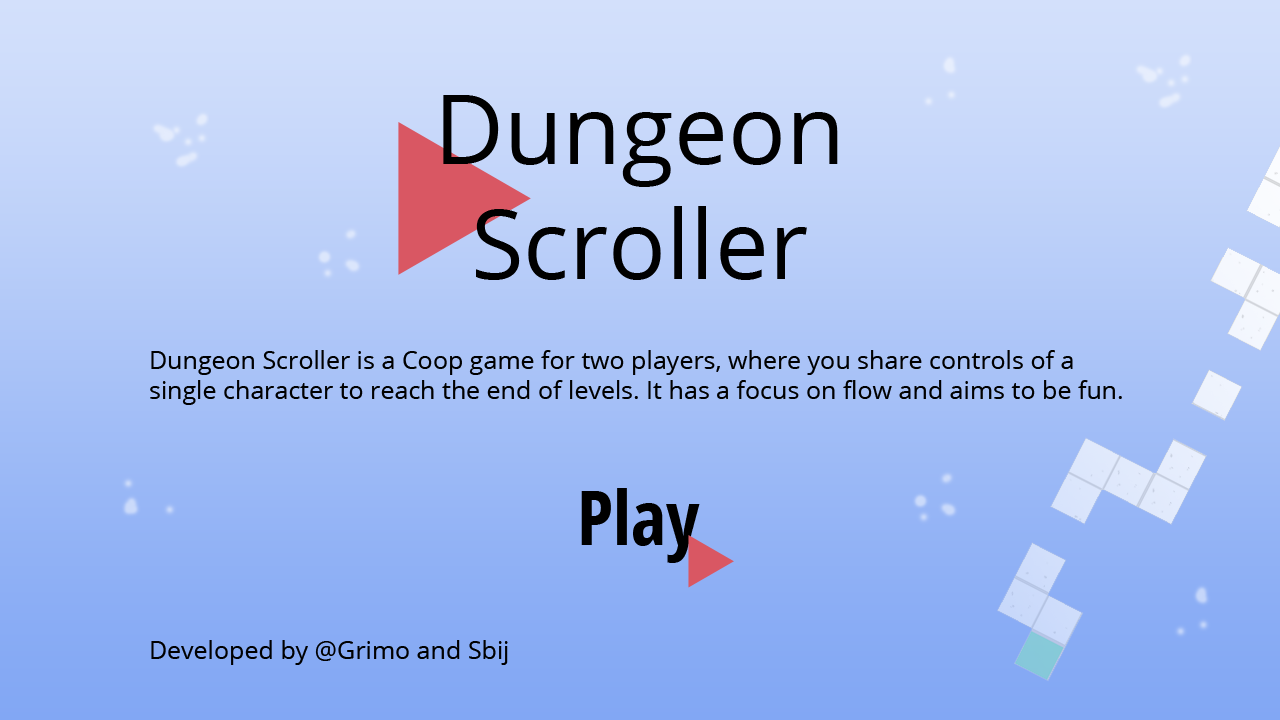
<style>
.page{position:relative;width:1280px;height:720px}
.page>*{position:absolute;margin:0}
.t1{font:96px "OpenSans";color:#000000}
.t2{font:25px "OpenSans";color:#000000}
.t3{font:75px "OpenSans-CondensedBold";color:#000000}
</style>
<div class="page">
<p class="t1" style="left:443px;top:95px;width:395px;height:185px;text-align:center">Dungeon<br>Scroller</p>
<p class="t2" style="left:150px;top:350px;width:972px;height:55px">Dungeon Scroller is a Coop game for two players, where you share controls of a single character to reach the end of levels. It has a focus on flow and aims to be fun.</p>
<p class="t3" style="left:581px;top:488px;width:119px;height:75px">Play</p>
<p class="t2" style="left:151px;top:640px;width:357px;height:25px">Developed by @Grimo and Sbij</p>
</div>
